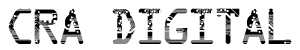
<style>
.page{position:relative;width:300px;height:50px;background:#ffffff}
.page>*{position:absolute;margin:0}
.t1{font:51.4px "Circuit";color:#010101}
</style>
<div class="page">
<p class="t1" style="left:8px;top:8px;width:284px;height:36px">cra digital</p>
</div>
